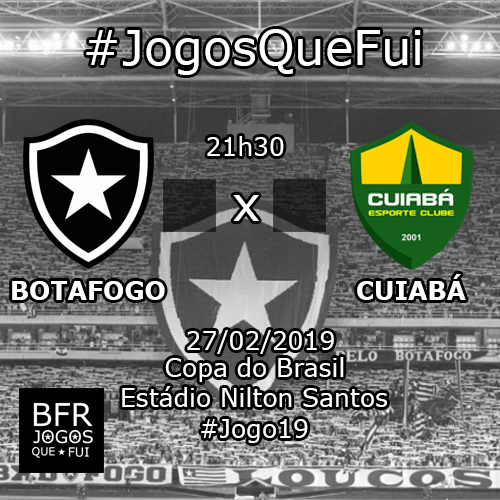
<style>
.page{position:relative;width:500px;height:500px}
.page>*{position:absolute;margin:0}
.t1{font:48px "Verdana";color:#ffffff}
.t2{font:25px "Verdana";color:#ffffff}
.t3{font:25px "Verdana-Bold";color:#ffffff}
</style>
<div class="page">
<p class="t1" style="left:86px;top:29px;width:335px;height:46px">#JogosQueFui</p>
<p class="t2" style="left:207px;top:136px;width:77px;height:20px">21h30</p>
<p class="t1" style="left:233px;top:195px;width:26px;height:26px">x</p>
<p class="t3" style="left:12px;top:281px;width:153px;height:19px">BOTAFOGO</p>
<p class="t3" style="left:357px;top:274px;width:109px;height:26px">CUIABÁ</p>
<p class="t2" style="left:187px;top:330px;width:147px;height:24px">27/02/2019</p>
<p class="t2" style="left:165px;top:357px;width:179px;height:25px">Copa do Brasil</p>
<p class="t2" style="left:122px;top:386px;width:265px;height:21px">Estádio Nilton Santos</p>
<p class="t2" style="left:201px;top:419px;width:107px;height:24px">#Jogo19</p>
</div>
